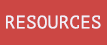
<style>
.page{position:relative;width:107px;height:45px;background:#cc4744}
.page>*{position:absolute;margin:0}
.t1{font:18px "PTMono-Regular";color:#f1f0f9}
</style>
<div class="page">
<p class="t1" style="left:6px;top:15px;width:95px;height:14px">RESOURCES</p>
</div>
